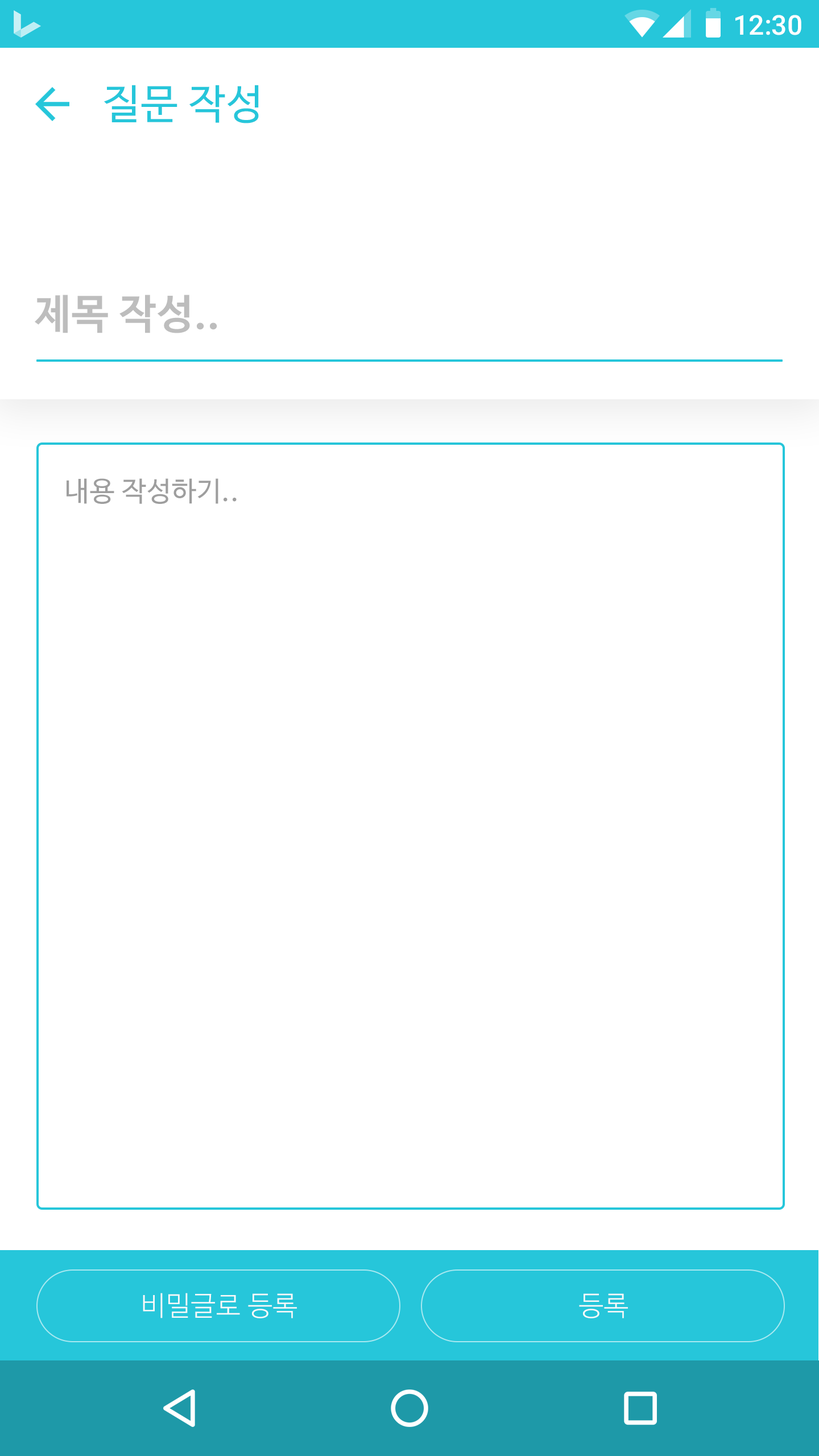
<style>
.page{position:relative;width:819px;height:1456px;background:#ffffff}
.page>*{position:absolute;margin:0}
.t1{font:27.3px "Roboto-Medium";color:#ffffff}
.t2{font:40.9px "NanumBarunGothic";letter-spacing:0.025em;color:#26c6da}
.t3{font:40.9px "NanumBarunGothicBold";letter-spacing:0.025em;color:#bdbdbd}
.t4{font:27.3px "NanumBarunGothic";letter-spacing:0.025em;color:#9e9e9e}
.t5{font:27.3px "NanumBarunGothicLight";letter-spacing:0.025em;color:#fafafa}
</style>
<div class="page">
<p class="t1" style="left:735px;top:15px;width:66px;height:20px">12:30</p>
<p class="t2" style="left:104px;top:85px;width:155px;height:38px">질문 작성</p>
<p class="t3" style="left:35px;top:295px;width:182px;height:38px">제목 작성..</p>
<p class="t4" style="left:67px;top:478px;width:170px;height:26px">내용 작성하기..</p>
<p class="t5" style="left:143px;top:1293px;width:154px;height:25px">비밀글로 등록</p>
<p class="t5" style="left:579px;top:1293px;width:49px;height:25px">등록</p>
</div>
